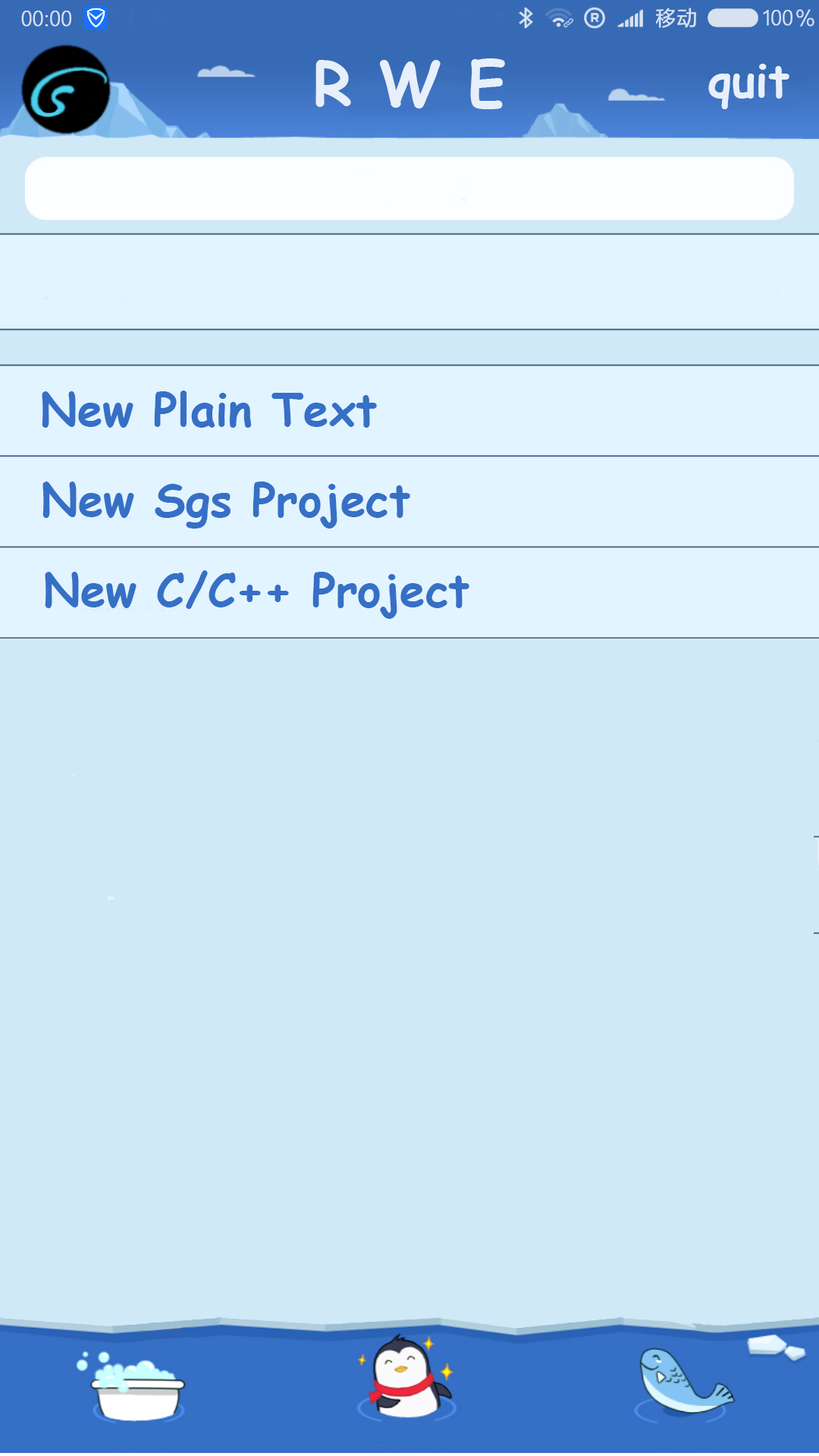
<style>
.page{position:relative;width:819px;height:1456px;background:#cfe9f6}
.page>*{position:absolute;margin:0}
.t1{font:19.7px "MicrosoftYaHeiLight";color:#d8e1f0;font-weight:bold}
.t2{font:60.7px "ComicSansMS-Bold";color:#e7effa}
.t3{font:45.5px "ComicSansMS-Bold";color:#e7effa}
.t4{font:45.5px "ComicSansMS-Bold";color:#366fc6}
</style>
<div class="page">
<p class="t1" style="left:21px;top:11px;width:50px;height:16px">00:00</p>
<p class="t1" style="left:763px;top:10px;width:29px;height:16px">100</p>
<p class="t2" style="left:315px;top:58px;width:190px;height:51px">R W E</p>
<p class="t3" style="left:708px;top:64px;width:81px;height:45px">quit</p>
<p class="t4" style="left:42px;top:391px;width:335px;height:37px">New Plain Text</p>
<p class="t4" style="left:42px;top:482px;width:368px;height:47px">New Sgs Project</p>
<p class="t4" style="left:45px;top:570px;width:424px;height:49px">New C/C++ Project</p>
</div>
